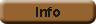
<style>
.page{position:relative;width:96px;height:24px;background:#95632f}
.page>*{position:absolute;margin:0}
.t1{font:13.5px "Arial-BoldMT";color:#1b1b1b}
</style>
<div class="page">
<p class="t1" style="left:36px;top:7px;width:24px;height:10px">Info</p>
</div>
